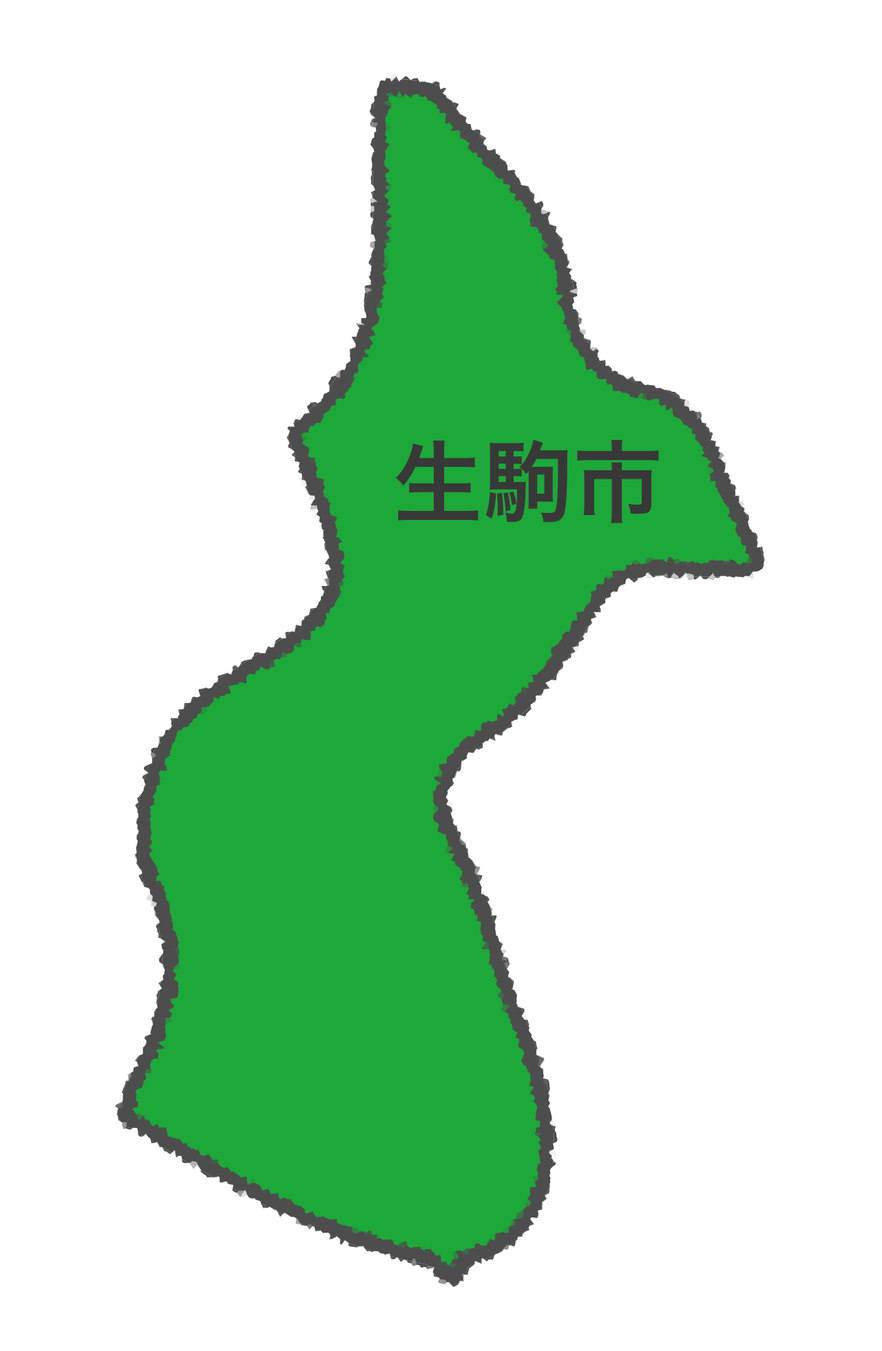
<style>
.page{position:relative;width:882px;height:1351px;background:#ffffff}
.page>*{position:absolute;margin:0}
.t1{font:89.8px "HiraKakuProN-W6";color:#383838}
</style>
<div class="page">
<p class="t1" style="left:395px;top:439px;width:264px;height:84px">生駒市</p>
</div>
